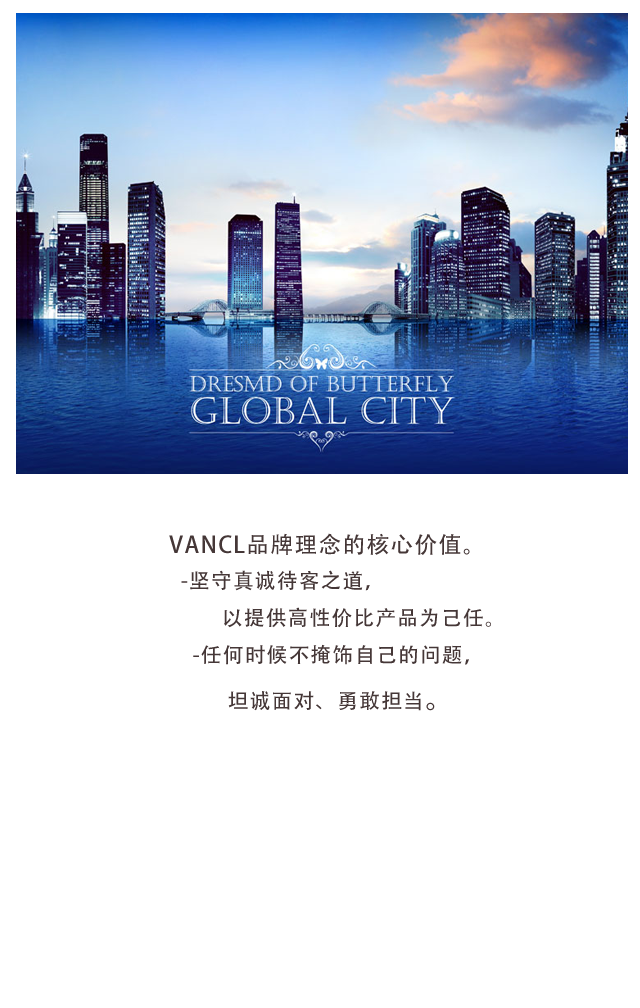
<style>
.page{position:relative;width:640px;height:1008px;background:#ffffff}
.page>*{position:absolute;margin:0}
.t1{font:20.7px/37.1px "AdobeHeitiStd-Regular";letter-spacing:0.06em;color:#453737;text-transform:uppercase}
.t2{font:22.7px/37.1px "AdobeHeitiStd-Regular";letter-spacing:0.06em;color:#453737;text-transform:uppercase}
.t3{font:30.7px/37.1px "AdobeHeitiStd-Regular";letter-spacing:0.06em;color:#453737;text-transform:uppercase}
</style>
<div class="page">
<p class="t1" style="left:169px;top:533px;width:322px;height:178px"><span class="t2">VANCL品牌理念的核心价值。<br></span>  -坚守真诚待客之道，<br>         以提供高性价比产品为己任。<br>    -任何时候不掩饰自己的问题，<br>          坦诚面对、勇敢担当<span class="t3">。</span></p>
</div>
